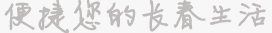
<style>
.page{position:relative;width:272px;height:33px;background:#f7f7f7}
.page>*{position:absolute;margin:0}
.t1{font:36px "FZJLJW--GB1-0";letter-spacing:0.02em;color:#bfbbbb;font-weight:bold}
</style>
<div class="page">
<p class="t1" style="left:4px;top:0px;width:262px;height:33px">便捷您的长春生活</p>
</div>
